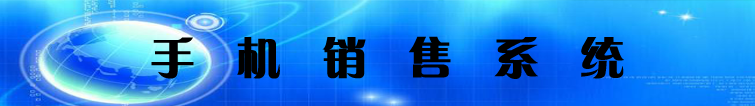
<style>
.page{position:relative;width:755px;height:106px}
.page>*{position:absolute;margin:0}
.t1{font:43.4px "FZCQJW--GB1-0";letter-spacing:0.1em;color:#000000;font-weight:bold}
</style>
<div class="page">
<p class="t1" style="left:151px;top:36px;width:473px;height:43px">手  机  销  售  系  统</p>
</div>
